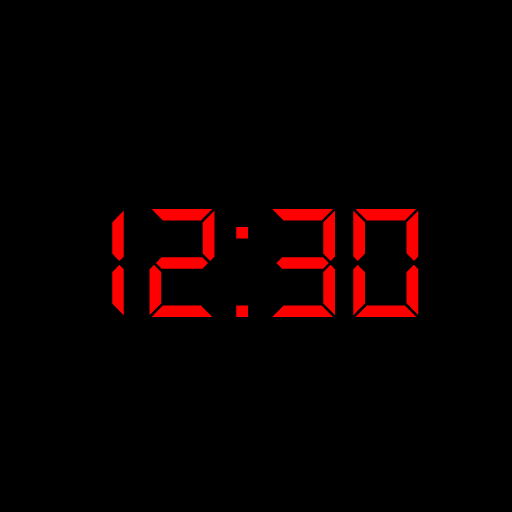
<style>
.page{position:relative;width:512px;height:512px;background:#000000}
.page>*{position:absolute;margin:0}
.t1{font:170px "DS-Digital";color:#ff0000}
</style>
<div class="page">
<p class="t1" style="left:112px;top:209px;width:307px;height:108px">12:30</p>
</div>
